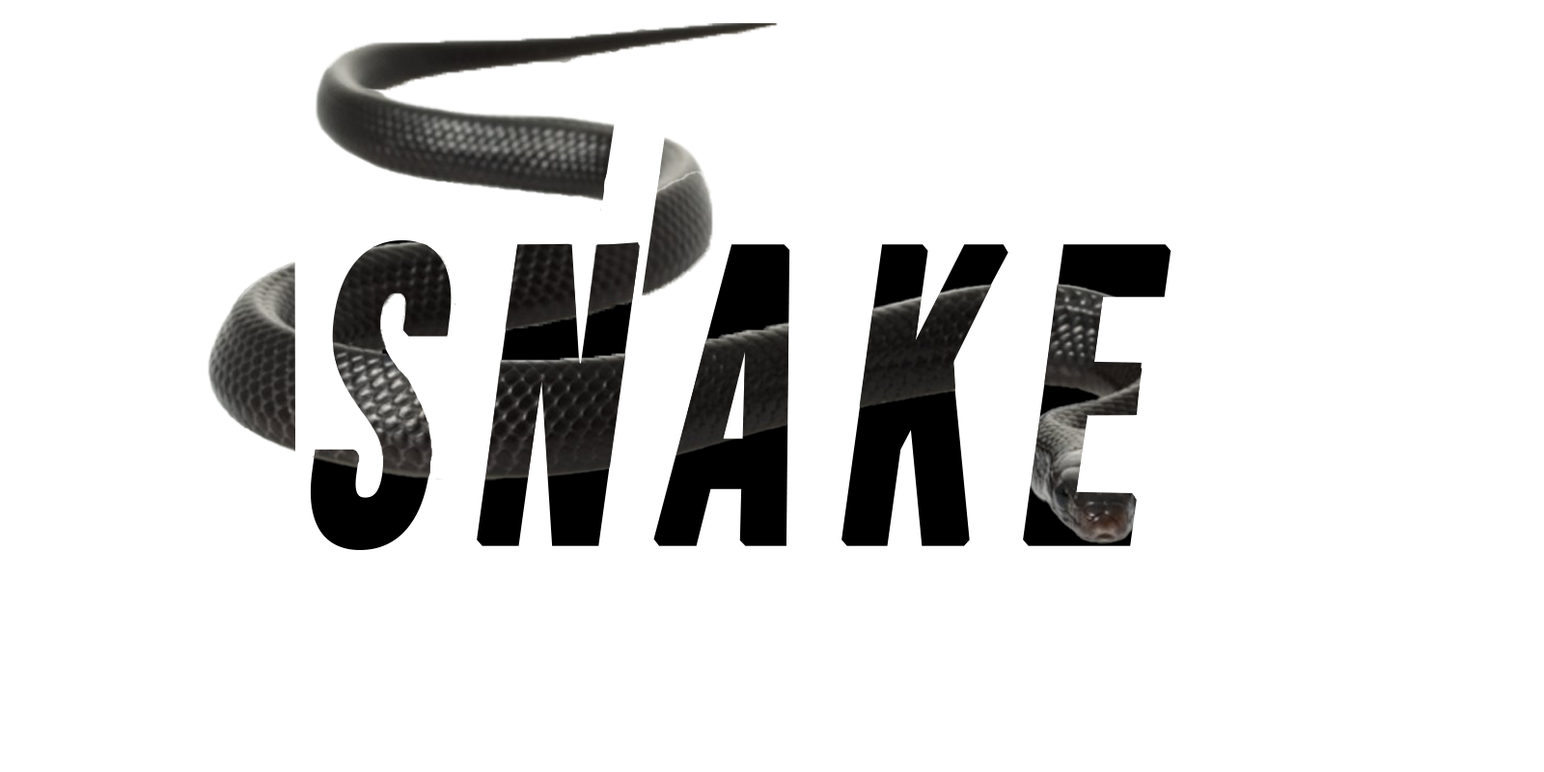
<style>
.page{position:relative;width:1544px;height:772px;background:#ffffff}
.page>*{position:absolute;margin:0}
.t1{font:415.4px "BebasNeue-Regular";letter-spacing:0.12em;font-weight:bold;font-style:italic;scale:0.78 1}
</style>
<div class="page">
<p class="t1" style="left:310px;top:240px;width:862px;height:310px">snake</p>
</div>
